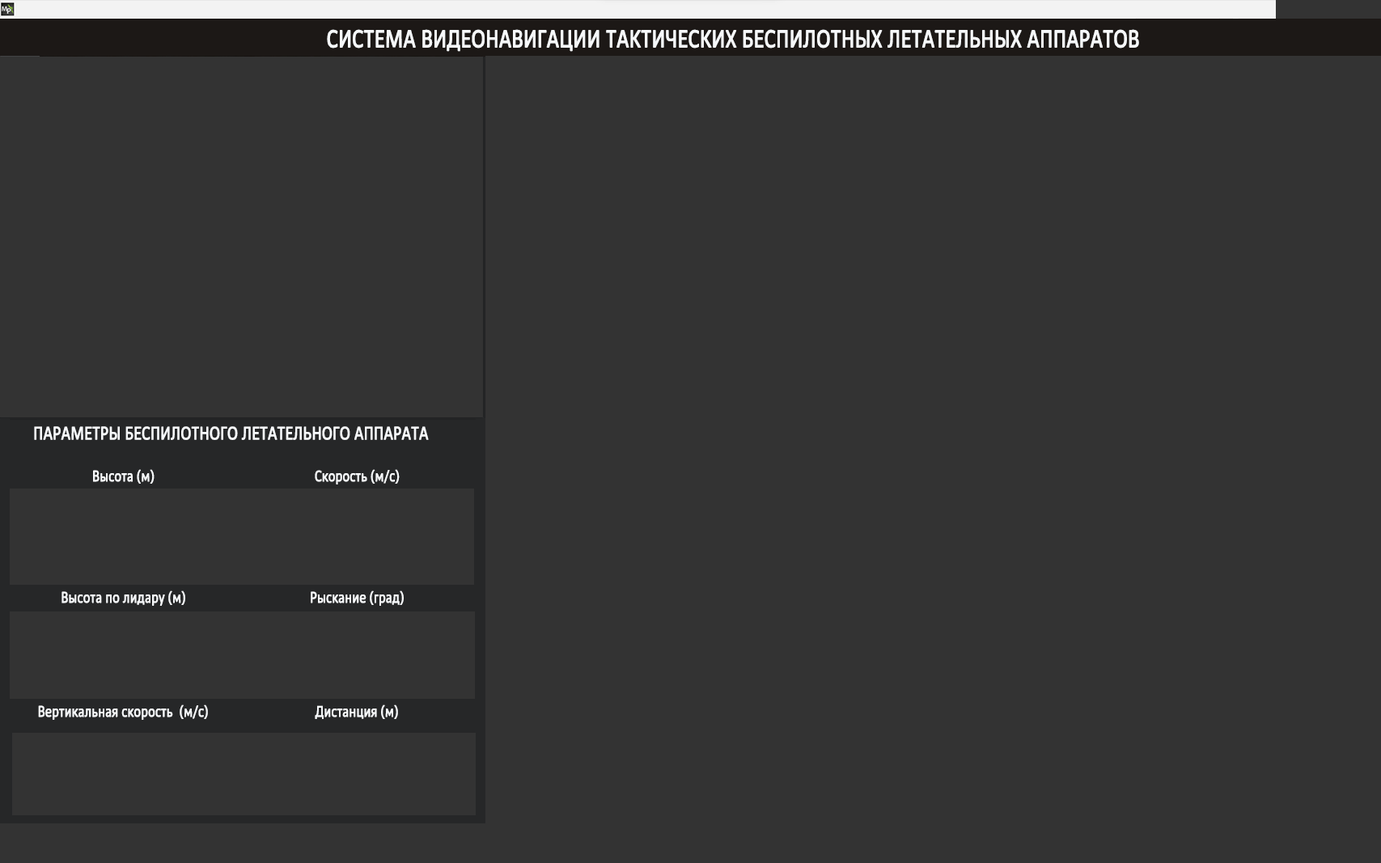
<style>
.page{position:relative;width:1381px;height:863px;background:#333333}
.page>*{position:absolute;margin:0}
.t1{font:16.2px "XOCaliburn";color:#f6f8fa;font-weight:bold;scale:0.8 1}
</style>
<div class="page">
<p class="t1" style="left:93px;top:469px;width:62px;height:15px">Высота (м) барометрическая (м)</p>
<p class="t1" style="left:315px;top:469px;width:85px;height:16px">Скорость (м/с)</p>
<p class="t1" style="left:61px;top:591px;width:124px;height:15px">Высота по лидару (м)</p>
<p class="t1" style="left:311px;top:591px;width:93px;height:15px">Рыскание (град)</p>
<p class="t1" style="left:38px;top:705px;width:170px;height:15px">Вертикальная скорость  (м/с)</p>
<p class="t1" style="left:315px;top:705px;width:83px;height:14px">Дистанция (м)</p>
</div>
